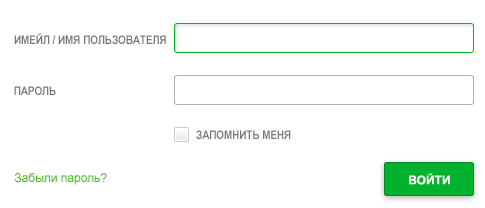
<style>
.page{position:relative;width:485px;height:208px;background:#ffffff}
.page>*{position:absolute;margin:0}
.t1{font:12px "ArialNarrow-Bold";color:#777777}
.t2{font:12px "ArialMT";color:#4fb22d}
.t3{font:12px "Arial-BoldMT";color:#fffff7}
</style>
<div class="page">
<p class="t1" style="left:14px;top:33px;width:152px;height:11px">ИМЕЙЛ / ИМЯ ПОЛЬЗОВАТЕЛЯ</p>
<p class="t1" style="left:14px;top:86px;width:42px;height:9px">ПАРОЛЬ</p>
<p class="t1" style="left:196px;top:130px;width:95px;height:9px">ЗАПОМНИТЬ МЕНЯ</p>
<p class="t2" style="left:14px;top:173px;width:93px;height:12px">Забыли пароль?</p>
<p class="t3" style="left:409px;top:173px;width:41px;height:12px">ВОЙТИ</p>
</div>
